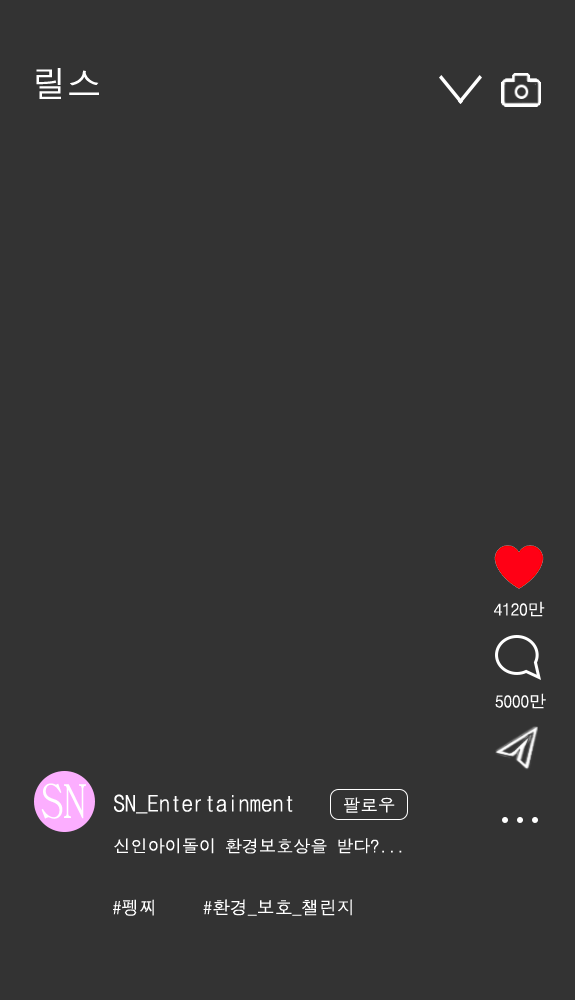
<style>
.page{position:relative;width:575px;height:1000px;background:#333333}
.page>*{position:absolute;margin:0}
.t1{font:35.5px "DotumChe";color:#ffffff}
.t2{font:17px "DotumChe";color:#ffffff}
.t3{font:22.7px "DotumChe";color:#ffffff}
.t4{font:17.4px "DotumChe";color:#ffffff}
.t5{font:17.1px "DotumChe";color:#ffffff}
.t6{font:17.9px "DotumChe";color:#ffffff}
</style>
<div class="page">
<p class="t1" style="left:36px;top:68px;width:63px;height:31px">릴스</p>
<p class="t2" style="left:494px;top:601px;width:51px;height:16px">4120만</p>
<p class="t2" style="left:495px;top:693px;width:51px;height:16px">5000만</p>
<p class="t3" style="left:114px;top:794px;width:179px;height:20px">SN_Entertainment</p>
<p class="t4" style="left:344px;top:797px;width:51px;height:16px">팔로우</p>
<p class="t5" style="left:114px;top:838px;width:288px;height:16px">신인아이돌이 환경보호상을 받다?...</p>
<p class="t6" style="left:113px;top:899px;width:41px;height:17px">#펭찌</p>
<p class="t6" style="left:203px;top:899px;width:149px;height:17px">#환경_보호_챌린지</p>
</div>
